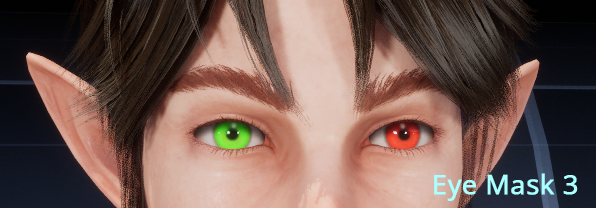
<style>
.page{position:relative;width:596px;height:208px}
.page>*{position:absolute;margin:0}
.t1{font:27px "OpenSans-Regular";color:#aaffff;font-weight:bold}
</style>
<div class="page">
<p class="t1" style="left:434px;top:173px;width:139px;height:28px">Eye Mask 1</p>
<p class="t1" style="left:434px;top:173px;width:144px;height:28px">Eye Mask 3</p>
</div>
